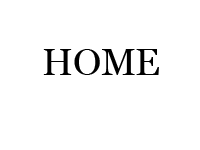
<style>
.page{position:relative;width:200px;height:150px;background:#ffffff}
.page>*{position:absolute;margin:0}
.t1{font:37.5px "Georgia";color:#000000}
</style>
<div class="page">
<p class="t1" style="left:43px;top:49px;width:116px;height:26px">HOME</p>
</div>
